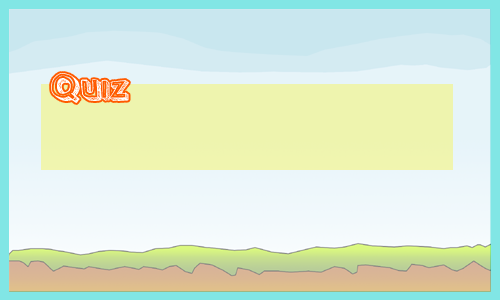
<style>
.page{position:relative;width:500px;height:300px}
.page>*{position:absolute;margin:0}
.t1{font:38.4px "Pointy";letter-spacing:-0.025em;color:#ffffff;scale:1.04 1}
</style>
<div class="page">
<p class="t1" style="left:51px;top:73px;width:78px;height:30px">Quiz</p>
</div>
